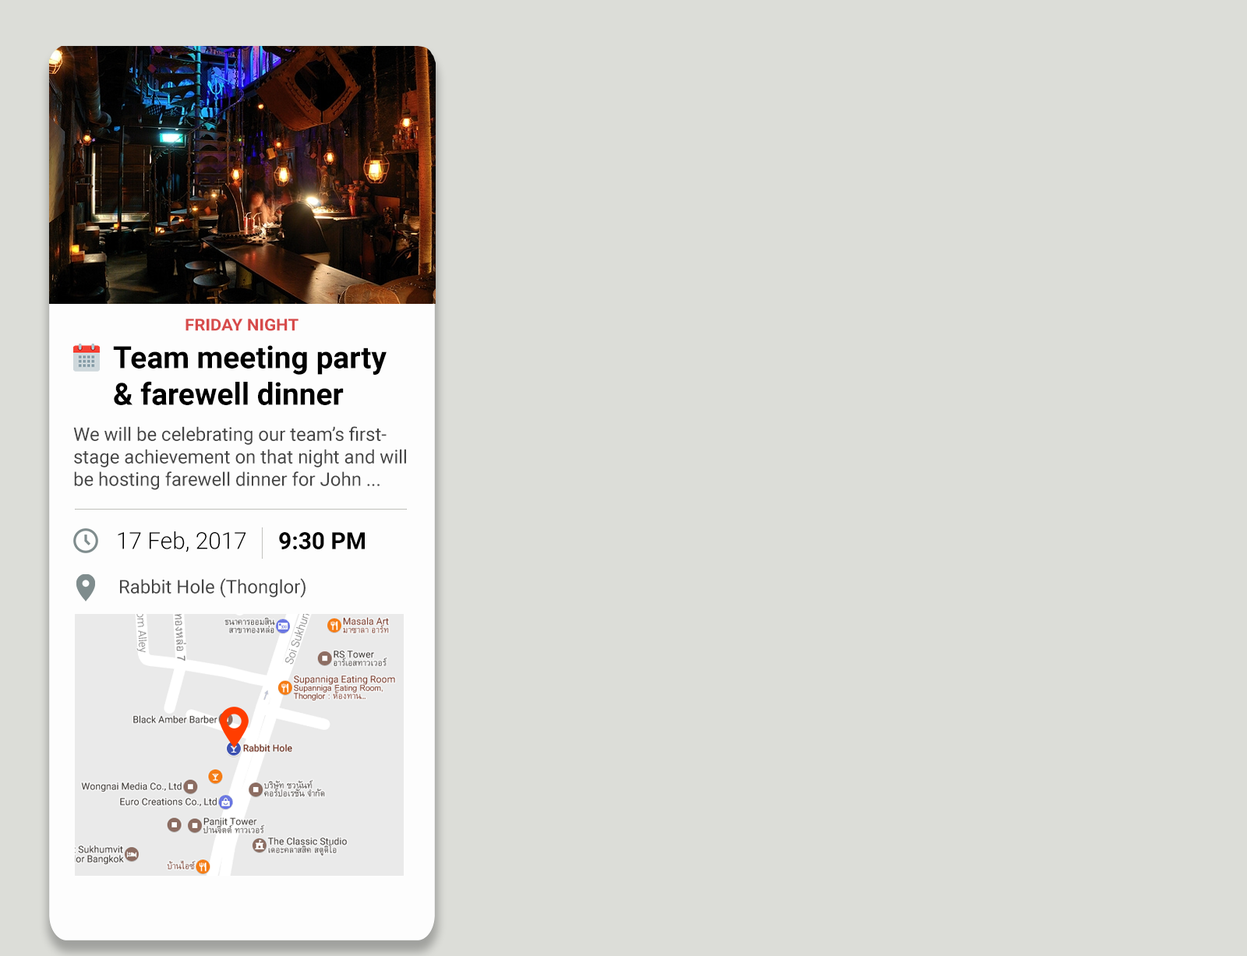
<style>
.page{position:relative;width:1247px;height:956px;background:#dcddd8}
.page>*{position:absolute;margin:0}
.t1{font:16.6px "Roboto-Bold";color:#d74b4b;scale:1.04 1}
.t2{font:30.5px "Roboto-Bold";color:#000000}
.t3{font:18.8px "Roboto-Regular";color:#454545}
.t4{font:23.4px "Roboto-Light";color:#000000}
.t5{font:23.5px "Roboto-Bold";color:#000000}
</style>
<div class="page">
<p class="t1" style="left:185px;top:319px;width:113px;height:12px">FRIDAY NIGHT</p>
<p class="t2" style="left:113px;top:345px;width:274px;height:60px">Team meeting party<br>&amp; farewell dinner</p>
<p class="t3" style="left:73px;top:426px;width:333px;height:64px">We will be celebrating our team’s first-<br>stage achievement on that night and will<br>be hosting farewell dinner for John ...</p>
<p class="t4" style="left:118px;top:532px;width:128px;height:21px">17 Feb, 2017</p>
<p class="t5" style="left:279px;top:532px;width:86px;height:17px">9:30 PM</p>
<p class="t3" style="left:120px;top:578px;width:186px;height:20px">Rabbit Hole (Thonglor)</p>
</div>
